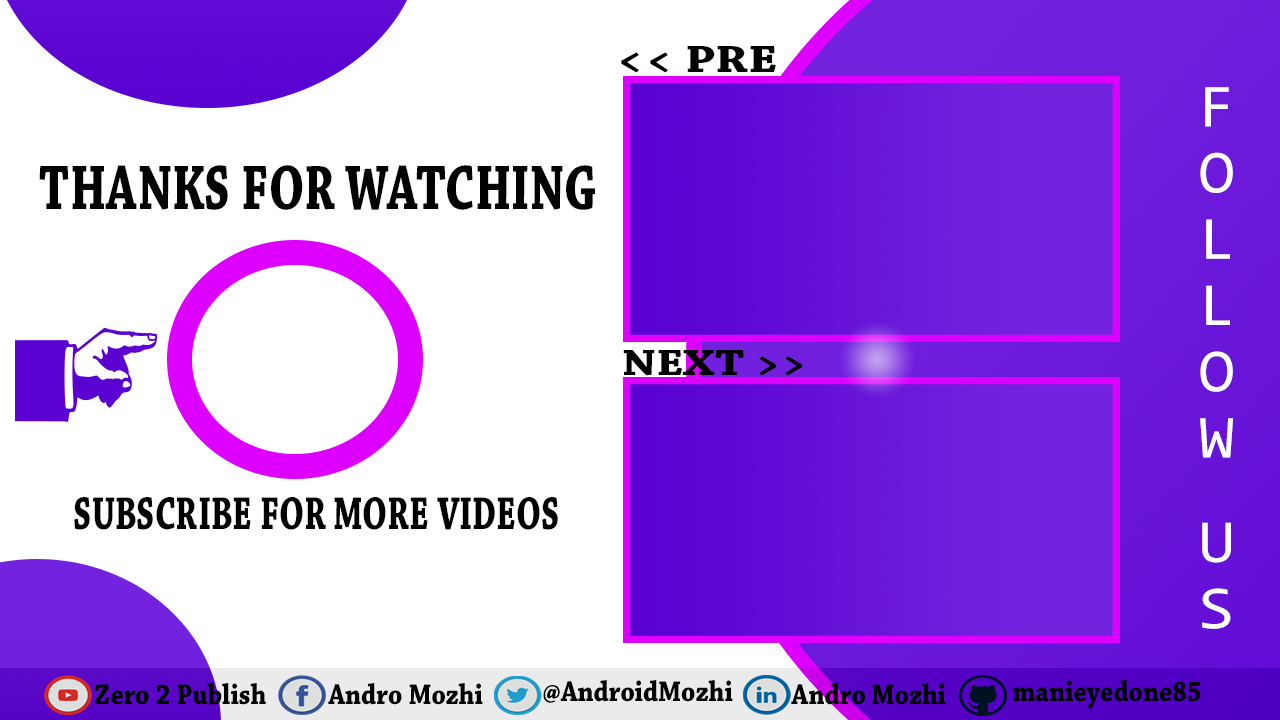
<style>
.page{position:relative;width:1280px;height:720px;background:#ffffff}
.page>*{position:absolute;margin:0}
.t1{font:40.1px "ChaparralPro-Bold";color:#020002;scale:1.27 1}
.t2{font:93.3px/18.7px "Consolas";letter-spacing:0.075em;color:#ffffff;scale:0.46 1}
.t3{font:66.2px "ChaparralPro-Bold";color:#020002;scale:0.73 1}
.t4{font:38.4px "ChaparralPro-Bold";color:#020002;scale:1.24 1}
.t5{font:48.6px "ChaparralPro-Bold";color:#020002;scale:0.7 1}
.t6{font:30.1px "ChaparralPro-Bold";color:#020002;scale:0.88 1}
</style>
<div class="page">
<p class="t1" style="left:621px;top:46px;width:155px;height:27px">&lt;&lt; PRE</p>
<p class="t2" style="left:1200px;top:87px;width:33px;height:542px;text-align:center">FOLLOW US</p>
<p class="t3" style="left:39px;top:165px;width:556px;height:45px">THANKS FOR WATCHING</p>
<p class="t4" style="left:623px;top:350px;width:179px;height:26px">NEXT &gt;&gt;</p>
<p class="t5" style="left:74px;top:497px;width:484px;height:33px">SUBSCRIBE FOR MORE VIDEOS</p>
<p class="t6" style="left:94px;top:683px;width:172px;height:22px">Zero 2 Publish</p>
<p class="t6" style="left:328px;top:683px;width:155px;height:22px">Andro Mozhi</p>
<p class="t6" style="left:543px;top:680px;width:190px;height:23px">@AndroidMozhi</p>
<p class="t6" style="left:791px;top:683px;width:155px;height:22px">Andro Mozhi</p>
<p class="t6" style="left:1013px;top:680px;width:188px;height:29px">manieyedone85</p>
</div>
